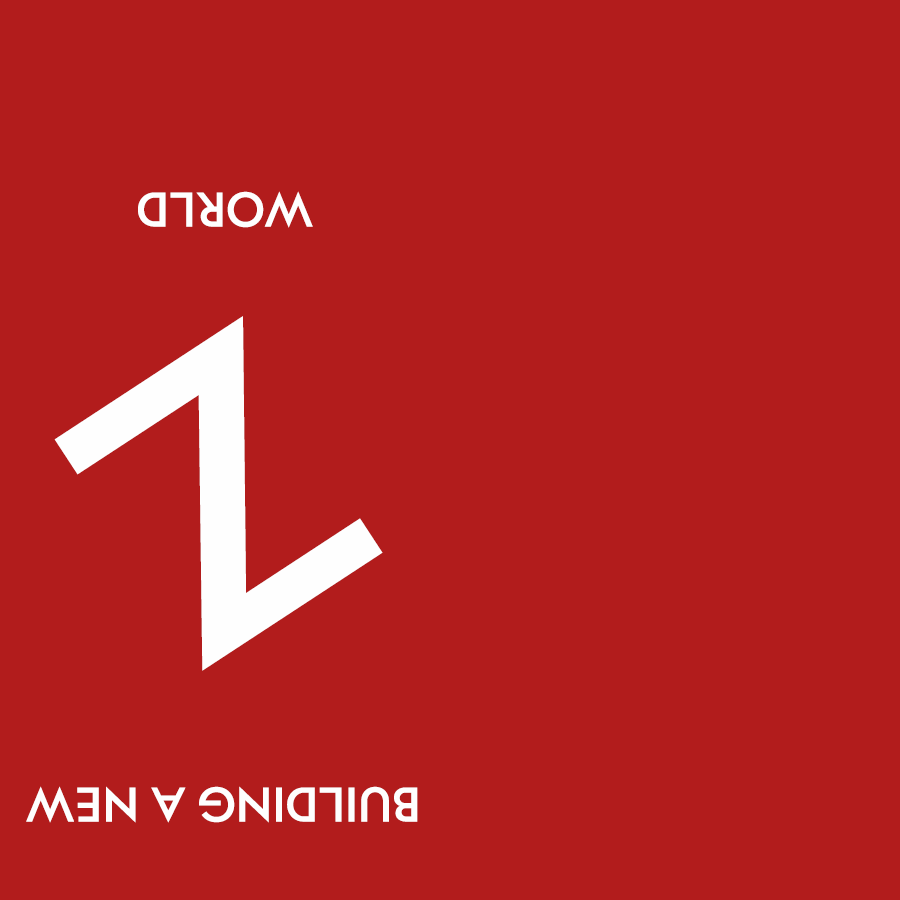
<style>
.page{position:relative;width:900px;height:900px;background:#b21c1c}
.page>*{position:absolute;margin:0}
.t1{font:48.5px "FONTSPRINGDEMO-CosmataSemiBoldRegular";color:#fefefe}
.t2{font:391.6px "FONTSPRINGDEMO-CosmataSemiBoldRegular";color:#fefefe}
</style>
<div class="page">
<p class="t1" style="left:138px;top:191px;width:175px;height:37px;rotate:180deg">WORLD</p>
<p class="t2" style="left:54px;top:316px;width:329px;height:355px;rotate:147deg">Z</p>
<p class="t1" style="left:26px;top:786px;width:392px;height:37px;rotate:180deg">BUILDING A NEW</p>
</div>
